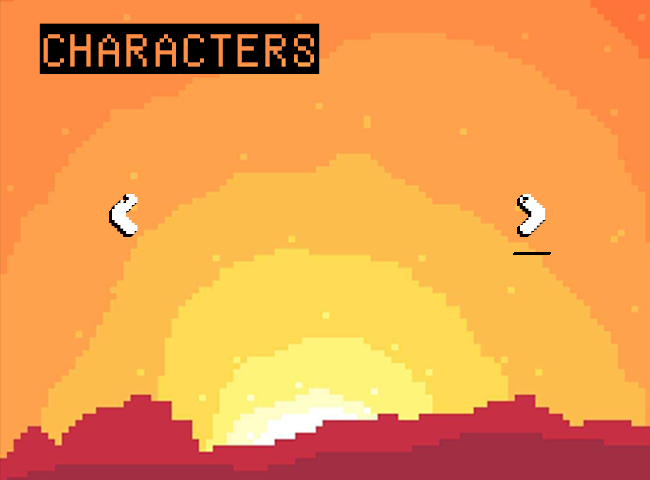
<style>
.page{position:relative;width:650px;height:480px;background:#fea24d}
.page>*{position:absolute;margin:0}
.t1{font:72px "Pixeland";color:#000000}
</style>
<div class="page">
<p class="t1" style="left:39px;top:23px;width:281px;height:51px">Characters</p>
</div>
